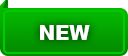
<style>
.page{position:relative;width:128px;height:56px}
.page>*{position:absolute;margin:0}
.t1{font:20px "Arial-Black";color:#ffffff}
</style>
<div class="page">
<p class="t1" style="left:40px;top:25px;width:50px;height:15px">NEW</p>
</div>
